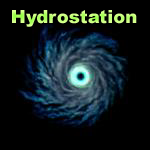
<style>
.page{position:relative;width:150px;height:150px;background:#000000}
.page>*{position:absolute;margin:0}
.t1{font:18px "Arial-Black"}
</style>
<div class="page">
<p class="t1" style="left:12px;top:10px;width:125px;height:17px">Hydrostation</p>
</div>
